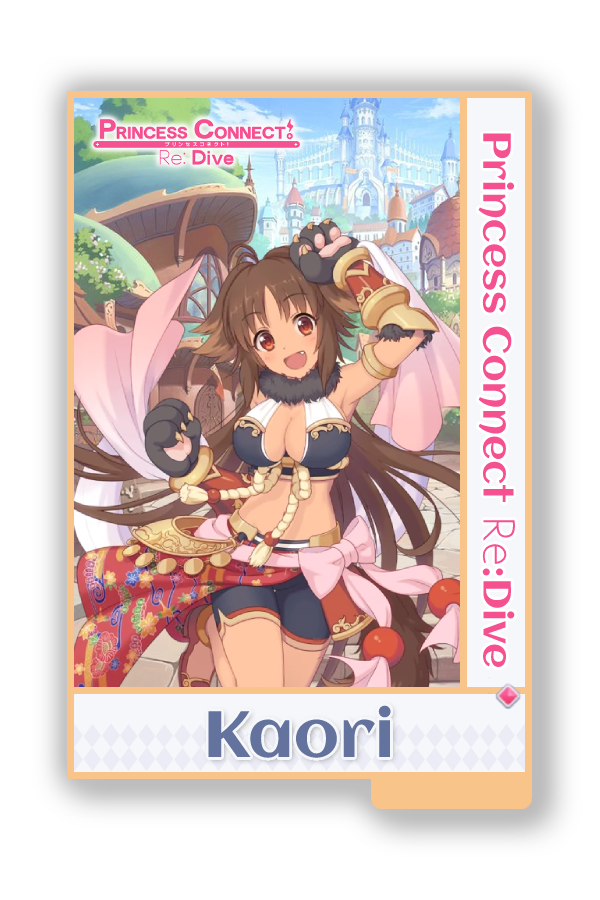
<style>
.page{position:relative;width:600px;height:900px;background:#ffffff}
.page>*{position:absolute;margin:0}
.t1{font:39px "Aclonica-Regular";color:#f55191}
.t2{font:39px "AaarghNormal";color:#f55191}
.t3{font:65px "Aclonica-Regular";color:#64739d}
</style>
<div class="page">
<p class="t1" style="left:478px;top:133px;width:38px;height:534px;rotate:90deg">Princess Connect <span class="t2">Re</span>:Dive</p>
<p class="t3" style="left:208px;top:705px;width:183px;height:53px">Kaori</p>
</div>
